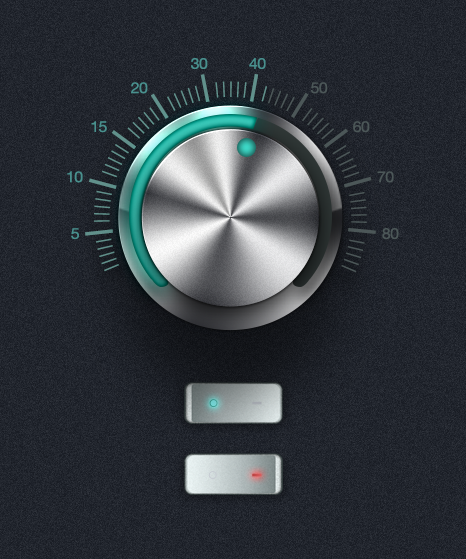
<style>
.page{position:relative;width:466px;height:559px}
.page>*{position:absolute;margin:0}
.t1{font:15.1px "HelveticaNeue";letter-spacing:-0.04em;color:#49908e;scale:1.06 1}
.t2{font:15.1px "HelveticaNeue";letter-spacing:-0.04em;color:#4c5758;scale:1.06 1}
</style>
<div class="page">
<p class="t1" style="left:191px;top:58px;width:17px;height:11px">30</p>
<p class="t1" style="left:249px;top:58px;width:17px;height:11px">40</p>
<p class="t1" style="left:131px;top:82px;width:17px;height:12px">20</p>
<p class="t2" style="left:311px;top:82px;width:17px;height:12px">50</p>
<p class="t1" style="left:91px;top:121px;width:16px;height:12px">15</p>
<p class="t2" style="left:353px;top:121px;width:17px;height:12px">60</p>
<p class="t1" style="left:67px;top:171px;width:16px;height:12px">10</p>
<p class="t2" style="left:377px;top:171px;width:17px;height:12px">70</p>
<p class="t1" style="left:71px;top:228px;width:8px;height:12px">5</p>
<p class="t2" style="left:382px;top:228px;width:17px;height:12px">80</p>
</div>
